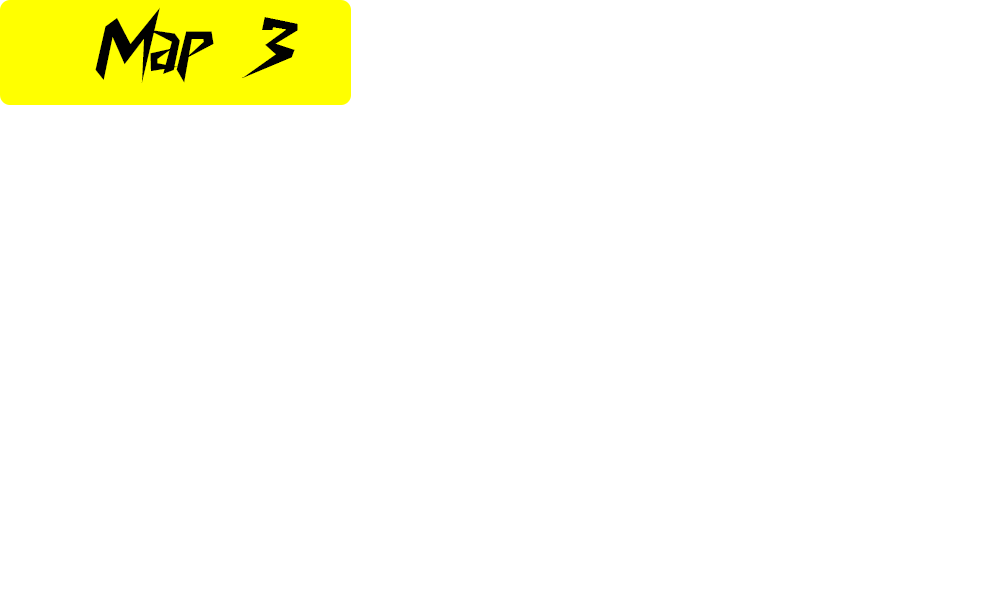
<style>
.page{position:relative;width:1001px;height:595px;background:#ffffff}
.page>*{position:absolute;margin:0}
.t1{font:74.6px "CyberwayRiders";color:#000000}
</style>
<div class="page">
<p class="t1" style="left:95px;top:7px;width:203px;height:76px">Map   3</p>
</div>
